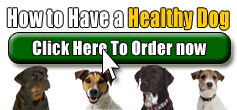
<style>
.page{position:relative;width:237px;height:110px;background:#ffffff}
.page>*{position:absolute;margin:0}
.t1{font:23.8px "Impact";letter-spacing:0.02em;color:#ffffff;scale:0.84 1}
.t2{font:23.8px "Impact";letter-spacing:0.02em;color:#ffcc00;scale:0.84 1}
.t3{font:18px "Impact";color:#ffffff}
</style>
<div class="page">
<p class="t1" style="left:7px;top:8px;width:222px;height:22px">How to Have a <span class="t2">Healthy Dog</span></p>
<p class="t3" style="left:32px;top:40px;width:175px;height:16px">Click Here To Order now</p>
</div>
